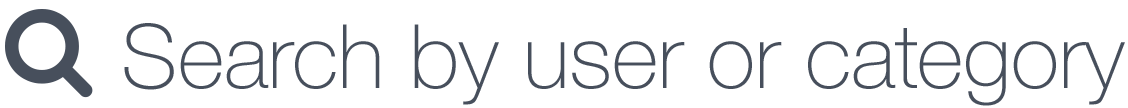
<style>
.page{position:relative;width:1128px;height:108px;background:#ffffff}
.page>*{position:absolute;margin:0}
.t1{font:89px "HelveticaNeue-Thin";color:#474f5c}
</style>
<div class="page">
<p class="t1" style="left:124px;top:23px;width:1001px;height:83px">Search by user or category</p>
</div>
